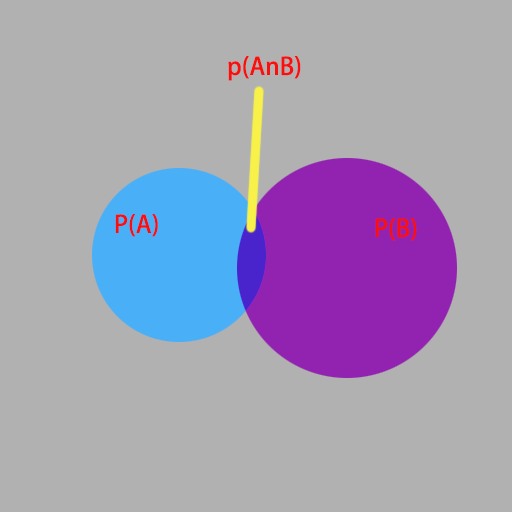
<style>
.page{position:relative;width:512px;height:512px;background:#b1b1b1}
.page>*{position:absolute;margin:0}
.t1{font:24px "AdobeHeitiStd-Regular";color:#fa0f0f}
</style>
<div class="page">
<p class="t1" style="left:228px;top:56px;width:73px;height:25px">p(AnB)</p>
<p class="t1" style="left:115px;top:214px;width:43px;height:23px">P(A)</p>
<p class="t1" style="left:375px;top:218px;width:42px;height:23px">P(B)</p>
</div>
